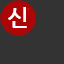
<style>
.page{position:relative;width:64px;height:64px;background:#333333}
.page>*{position:absolute;margin:0}
.t1{font:23px "NanumGothicBold";color:#ffffff}
</style>
<div class="page">
<p class="t1" style="left:8px;top:7px;width:19px;height:21px">신</p>
</div>
